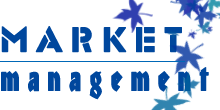
<style>
.page{position:relative;width:220px;height:110px;background:#ffffff}
.page>*{position:absolute;margin:0}
.t1{font:36px "318-CAI978";letter-spacing:0.24em;color:#00479d;font-weight:bold}
.t2{font:34px "437-CAI978";letter-spacing:0.24em;color:#00479d;font-weight:bold;scale:0.79 1}
</style>
<div class="page">
<p class="t1" style="left:1px;top:26px;width:181px;height:27px">Market</p>
<p class="t2" style="left:1px;top:67px;width:208px;height:33px">management</p>
</div>
